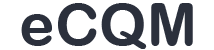
<style>
.page{position:relative;width:214px;height:50px;background:#ffffff}
.page>*{position:absolute;margin:0}
.t1{font:60px "ArialRoundedMTBold";color:#2b303c}
</style>
<div class="page">
<p class="t1" style="left:21px;top:3px;width:172px;height:46px">eCQM</p>
</div>
